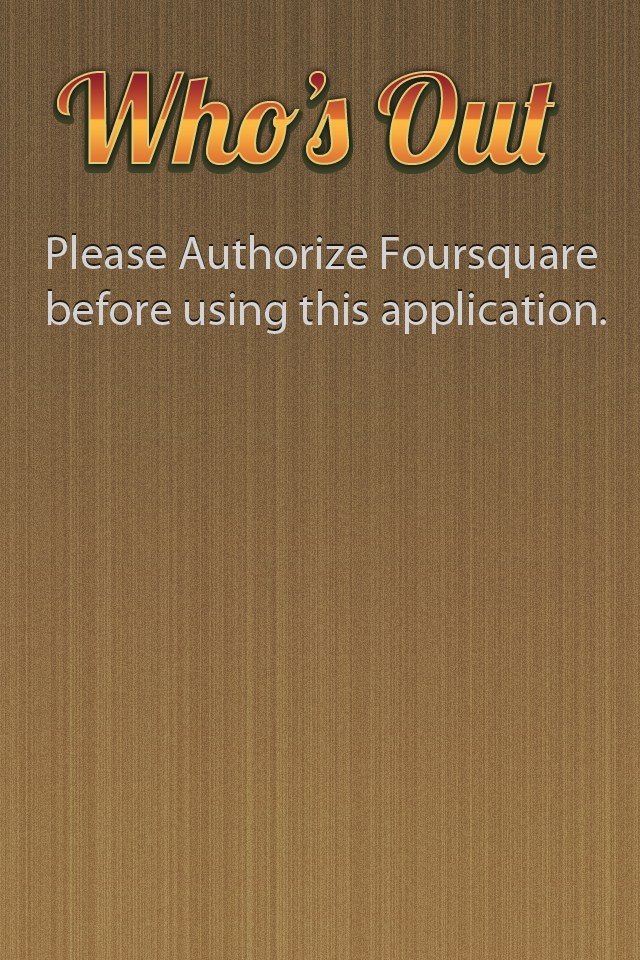
<style>
.page{position:relative;width:640px;height:960px}
.page>*{position:absolute;margin:0}
.t1{font:124.2px "Lobster1.4"}
.t2{font:46.6px "MyriadPro-Regular";color:#d3d3d3}
</style>
<div class="page">
<p class="t1" style="left:57px;top:71px;width:498px;height:94px">Who’sOut</p>
<p class="t2" style="left:47px;top:235px;width:559px;height:99px;text-align:center">Please Authorize Foursquare <br>before using this application.</p>
</div>
